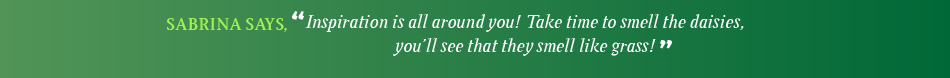
<style>
.page{position:relative;width:950px;height:78px}
.page>*{position:absolute;margin:0}
.t1{font:36px "AdelleBasic-BoldItalic";color:#ffffff}
.t2{font:20px "InglebyItalic-Italic";color:#ffffff}
.t3{font:18px "Ingleby-Bold";color:#a0f051}
</style>
<div class="page">
<p class="t1" style="left:292px;top:11px;width:12px;height:9px">“</p>
<p class="t2" style="left:305px;top:14px;width:439px;height:42px;text-align:center">Inspiration is all around you! Take time to smell the daisies, <br>you'll see that they smell like grass!</p>
<p class="t3" style="left:167px;top:18px;width:120px;height:14px">SABRINA SAYS,</p>
<p class="t1" style="left:660px;top:40px;width:12px;height:9px">”</p>
</div>
